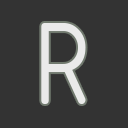
<style>
.page{position:relative;width:128px;height:128px;background:#333333}
.page>*{position:absolute;margin:0}
.t1{font:125px "ISOCPEUR";color:#eaeaea;scale:0.91 1}
</style>
<div class="page">
<p class="t1" style="left:41px;top:23px;width:45px;height:81px">R</p>
</div>
